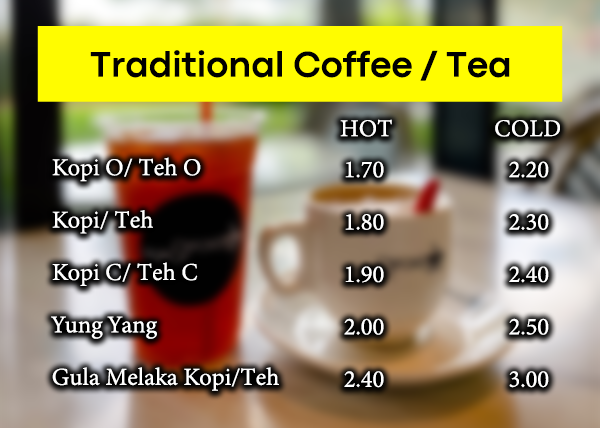
<style>
.page{position:relative;width:600px;height:428px}
.page>*{position:absolute;margin:0}
.t1{font:37.1px "CodecPro-Bold";color:#000000}
.t2{font:24.3px "MinionVariableConcept-Roman";color:#ffffff}
.t3{font:24.3px/52.4px "MinionVariableConcept-Roman";color:#ffffff}
</style>
<div class="page">
<p class="t1" style="left:90px;top:50px;width:420px;height:31px">Traditional Coffee / Tea</p>
<p class="t2" style="left:340px;top:119px;width:220px;height:18px">HOT                  COLD</p>
<p class="t3" style="left:51px;top:157px;width:228px;height:234px">Kopi O/ Teh O<br>Kopi/ Teh<br>Kopi C/ Teh C<br>Yung Yang<br>Gula Melaka Kopi/Teh</p>
</div>
